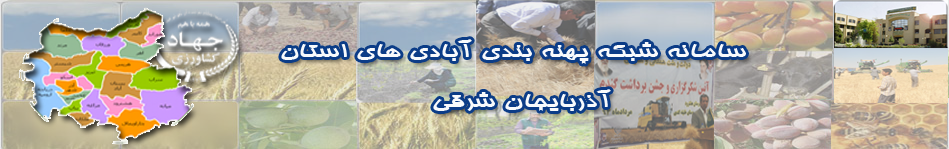
<style>
.page{position:relative;width:949px;height:149px}
.page>*{position:absolute;margin:0}
.t1{font:20.8px "BHoma";color:#f8fafc;scale:1.58 1}
</style>
<div class="page">
<p class="t1" style="left:281px;top:39px;width:465px;height:72px;text-align:center">سامانه شبکه پهنه بندي آبادي هاي استان   <br><br>آذربايجان شرقي</p>
</div>
